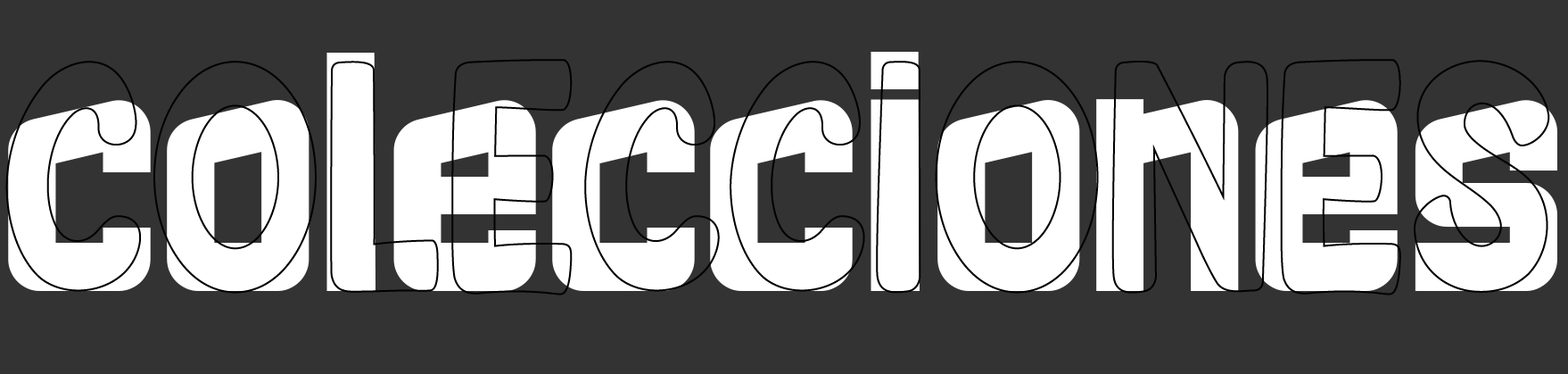
<style>
.page{position:relative;width:1568px;height:374px;background:#333333}
.page>*{position:absolute;margin:0}
.t1{font:341.9px "Failed-Regular";color:#ffffff;scale:0.86 1}
</style>
<div class="page">
<p class="t1" style="left:8px;top:52px;width:1549px;height:239px">COLECCIONES</p>
</div>
